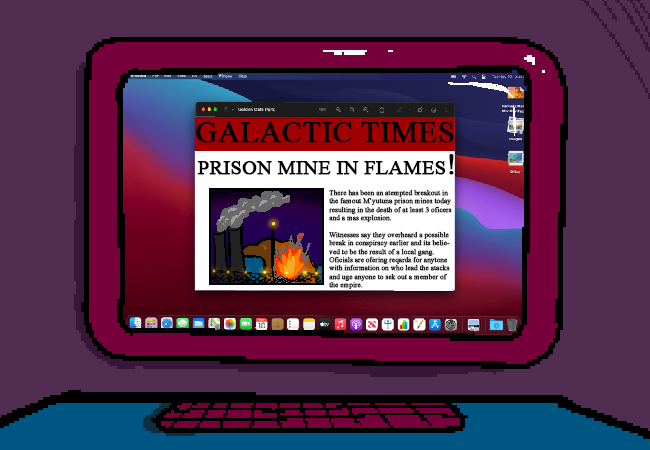
<style>
.page{position:relative;width:650px;height:450px;background:#512d51}
.page>*{position:absolute;margin:0}
.t1{font:30px "TimesNewRomanPSMT";color:#000000;text-transform:uppercase;font-weight:bold}
.t2{font:20px "TimesNewRomanPSMT";color:#000000;text-transform:uppercase;font-weight:bold}
.t3{font:7px "TimesNewRomanPSMT";color:#000000;font-weight:bold}
</style>
<div class="page">
<p class="t1" style="left:196px;top:122px;width:258px;height:21px">galactic times</p>
<p class="t2" style="left:197px;top:154px;width:257px;height:21px">prison mine in flames<span class="t1">!</span></p>
<p class="t3" style="left:329px;top:189px;width:123px;height:100px">There has been an atempted breakout in <br>the famout M’yutuna prison mines today <br>resulting in the death of at least 3 oficers<br>and a mas explosion. <br><br>Witnesses say they overheard a possible <br>break in conspiracy earlier and its belie-<br>ved to be the result of a local gang. <br>Oficials are ofering reqards for anytone<br>with information on who lead the atacks <br>and uge anyone to sek out a member of <br>the empire.</p>
</div>
